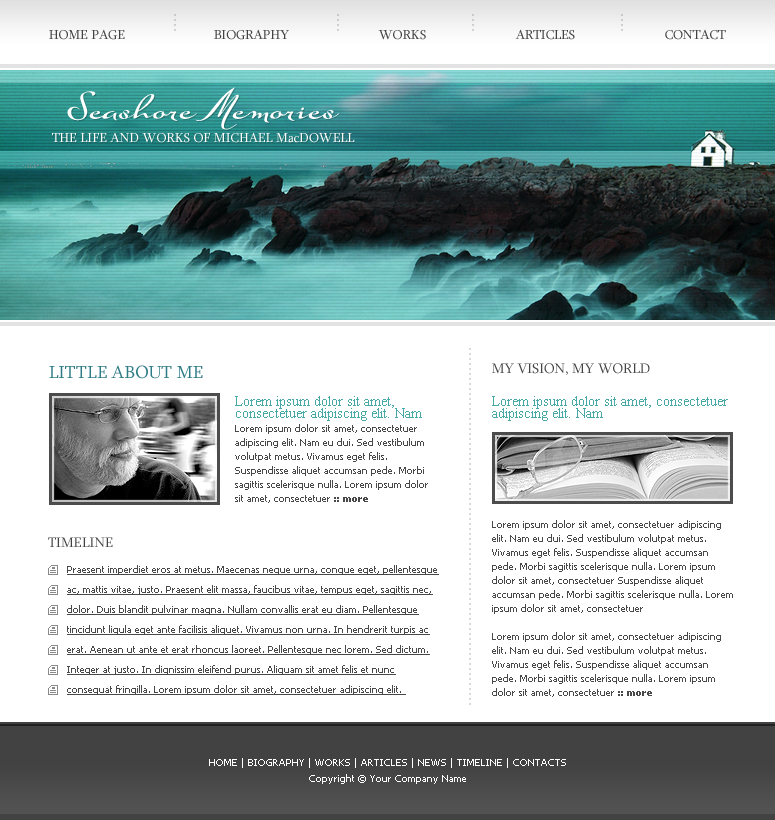
<style>
.page{position:relative;width:775px;height:820px;background:#ffffff}
.page>*{position:absolute;margin:0}
.t1{font:18.8px "Sylfaen";color:#cdcdcd}
.t2{font:13.2px "Sylfaen";color:#414141}
.t3{font:37.2px "SuaveScriptAlt-Bold";color:#ffffff}
.t4{font:13.2px "Sylfaen";color:#ffffff}
.t5{font:18.8px "Sylfaen";color:#d9d9d9}
.t6{font:18px "Sylfaen";color:#2d7b85}
.t7{font:14px "Sylfaen";color:#424242;text-transform:uppercase}
.t8{font:10px/14px "Tahoma";color:#484848}
.t9{font:14px/12px "TimesNewRomanPSMT";color:#47a8a6}
.t10{font:10px/14px "Tahoma-Bold";color:#484848}
.t11{font:10px/20px "Tahoma";color:#484848;text-decoration:underline}
.t12{font:10px/16px "Tahoma";color:#ffffff}
</style>
<div class="page">
<p class="t1" style="left:174px;top:14px;width:2px;height:17px;rotate:90deg">....</p>
<p class="t1" style="left:337px;top:14px;width:2px;height:17px;rotate:90deg">....</p>
<p class="t1" style="left:472px;top:14px;width:2px;height:17px;rotate:90deg">....</p>
<p class="t1" style="left:621px;top:14px;width:2px;height:17px;rotate:90deg">....</p>
<p class="t2" style="left:49px;top:29px;width:76px;height:11px">HOME PAGE</p>
<p class="t2" style="left:214px;top:29px;width:75px;height:11px">BIOGRAPHY</p>
<p class="t2" style="left:378px;top:30px;width:48px;height:10px">WORKS</p>
<p class="t2" style="left:515px;top:29px;width:60px;height:11px">ARTICLES</p>
<p class="t2" style="left:665px;top:29px;width:61px;height:11px">CONTACT</p>
<p class="t3" style="left:67px;top:87px;width:273px;height:43px">Seashore Memories</p>
<p class="t4" style="left:52px;top:132px;width:303px;height:11px">THE LIFE AND WORKS OF MICHAEL MacDOWELL</p>
<p class="t5" style="left:469px;top:348px;width:2px;height:357px;rotate:90deg">........................................................................</p>
<p class="t6" style="left:49px;top:365px;width:154px;height:14px">LITTLE ABOUT ME</p>
<p class="t7" style="left:492px;top:363px;width:158px;height:12px">MY VISION, MY WORLD</p>
<p class="t8" style="left:235px;top:396px;width:193px;height:107px"><span class="t9">Lorem ipsum dolor sit amet, consectetuer adipiscing elit. Nam <br></span>Lorem ipsum dolor sit amet, consectetuer adipiscing elit. Nam eu dui. Sed vestibulum volutpat metus. Vivamus eget felis. Suspendisse aliquet accumsan pede. Morbi sagittis scelerisque nulla. Lorem ipsum dolor sit amet, consectetuer<span class="t10"> :: more</span></p>
<p class="t9" style="left:492px;top:396px;width:236px;height:25px">Lorem ipsum dolor sit amet, consectetuer adipiscing elit. Nam</p>
<p class="t8" style="left:492px;top:520px;width:241px;height:177px">Lorem ipsum dolor sit amet, consectetuer adipiscing elit. Nam eu dui. Sed vestibulum volutpat metus. Vivamus eget felis. Suspendisse aliquet accumsan pede. Morbi sagittis scelerisque nulla. Lorem ipsum dolor sit amet, consectetuer Suspendisse aliquet accumsan pede. Morbi sagittis scelerisque nulla. Lorem ipsum dolor sit amet, consectetuer<br><br>Lorem ipsum dolor sit amet, consectetuer adipiscing elit. Nam eu dui. Sed vestibulum volutpat metus. Vivamus eget felis. Suspendisse aliquet accumsan pede. Morbi sagittis scelerisque nulla. Lorem ipsum dolor sit amet, consectetuer <span class="t10">:: more</span></p>
<p class="t7" style="left:48px;top:537px;width:65px;height:11px">TIMELINE</p>
<p class="t11" style="left:67px;top:565px;width:372px;height:130px">Praesent imperdiet eros at metus. Maecenas neque urna, congue eget, pellentesque ac, mattis vitae, justo. Praesent elit massa, faucibus vitae, tempus eget, sagittis nec, dolor. Duis blandit pulvinar magna. Nullam convallis erat eu diam. Pellentesque tincidunt ligula eget ante facilisis aliquet. Vivamus non urna. In hendrerit turpis ac erat. Aenean ut ante et erat rhoncus laoreet. Pellentesque nec lorem. Sed dictum. Integer at justo. In dignissim eleifend purus. Aliquam sit amet felis et nunc consequat fringilla. Lorem ipsum dolor sit amet, consectetuer adipiscing elit.</p>
<p class="t12" style="left:209px;top:758px;width:357px;height:26px;text-align:center">HOME | BIOGRAPHY | WORKS | ARTICLES | NEWS | TIMELINE | CONTACTS<br>Copyright © Your Company Name</p>
</div>
